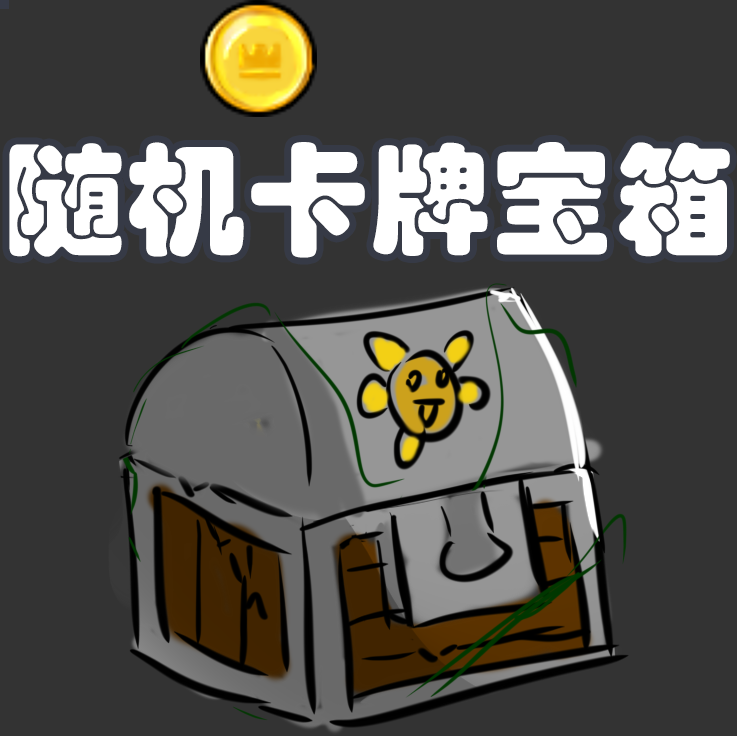
<style>
.page{position:relative;width:737px;height:736px;background:#333333}
.page>*{position:absolute;margin:0}
.t1{font:121.8px "STHupo";color:#ffffff}
</style>
<div class="page">
<p class="t1" style="left:9px;top:142px;width:721px;height:116px">随机卡牌宝箱</p>
</div>
